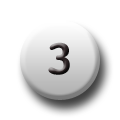
<style>
.page{position:relative;width:120px;height:120px;background:#ffffff}
.page>*{position:absolute;margin:0}
.t1{font:49.7px "Courier-Bold"}
</style>
<div class="page">
<p class="t1" style="left:48px;top:42px;width:22px;height:33px">3</p>
</div>
